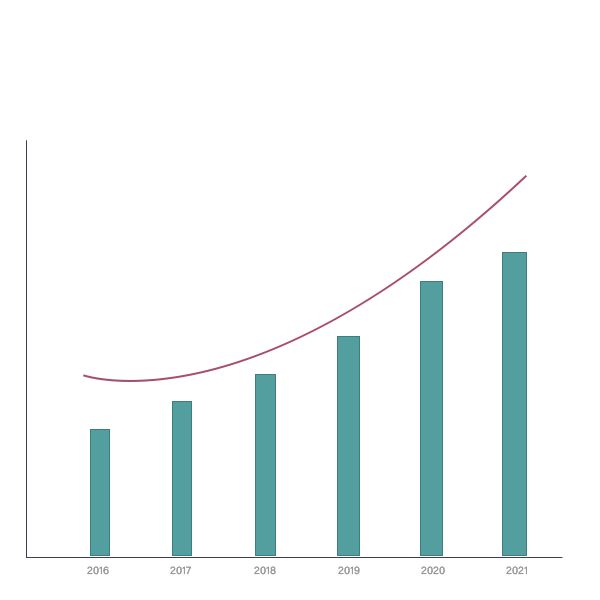
<style>
.page{position:relative;width:600px;height:600px;background:#ffffff}
.page>*{position:absolute;margin:0}
.t1{font:11px "AcuminConcept-Regular";color:#9a9a9a}
</style>
<div class="page">
<p class="t1" style="left:87px;top:566px;width:22px;height:9px">2016</p>
<p class="t1" style="left:170px;top:566px;width:22px;height:9px">2017</p>
<p class="t1" style="left:254px;top:566px;width:22px;height:9px">2018</p>
<p class="t1" style="left:338px;top:566px;width:22px;height:9px">2019</p>
<p class="t1" style="left:421px;top:566px;width:24px;height:9px">2020</p>
<p class="t1" style="left:506px;top:566px;width:21px;height:9px">2021</p>
</div>
